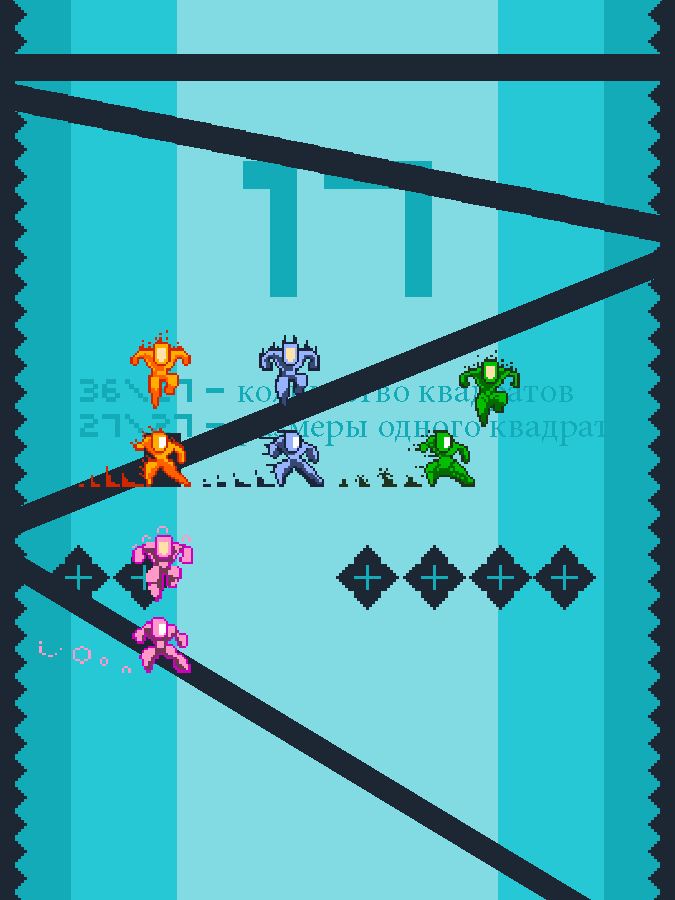
<style>
.page{position:relative;width:675px;height:900px;background:#82dbe2}
.page>*{position:absolute;margin:0}
.t1{font:434.3px "SnareDrumThreeNBP";color:#14abb8}
.t2{font:36px "MinionPro-Regular";color:#14abb8}
.t3{font:72px "SnareDrumThreeNBP";color:#14abb8}
</style>
<div class="page">
<p class="t1" style="left:243px;top:161px;width:189px;height:136px">17</p>
<p class="t2" style="left:80px;top:414px;width:546px;height:32px"><span class="t3">27\27 - </span>размеры одного квадрата</p>
</div>
